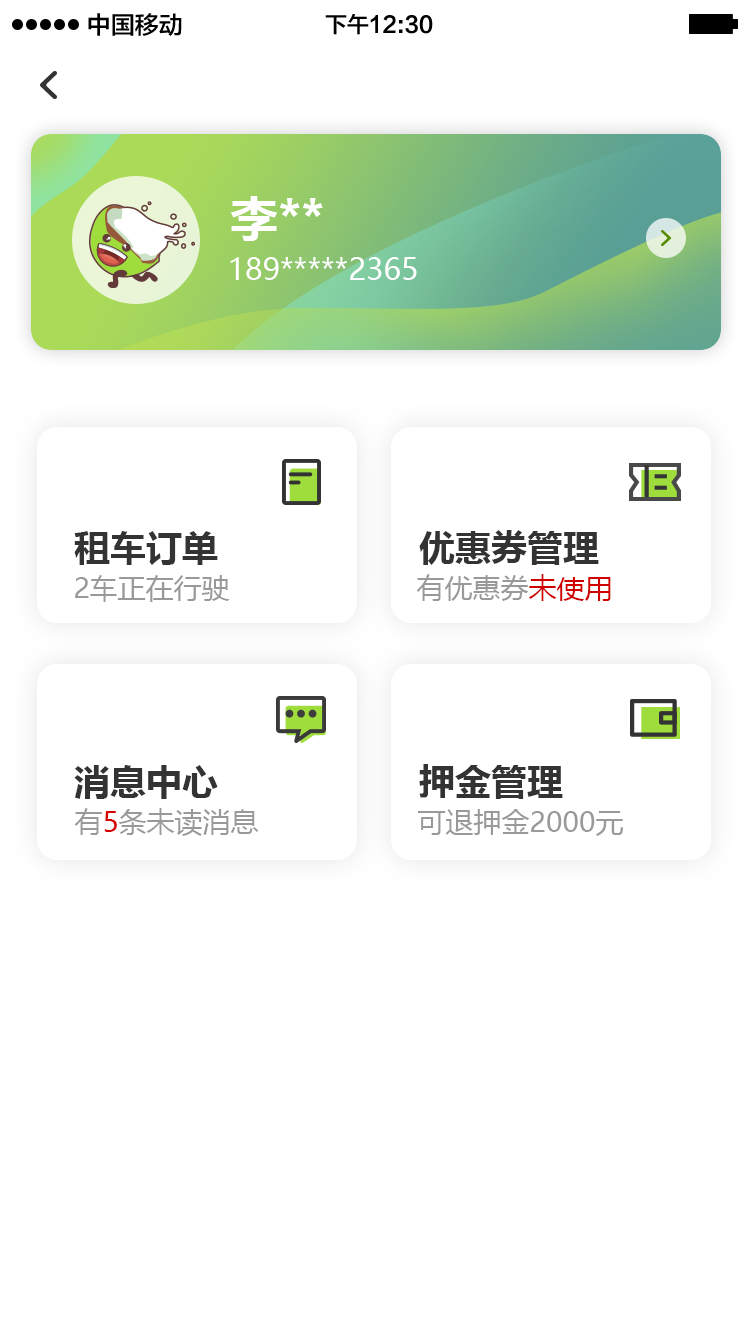
<style>
.page{position:relative;width:750px;height:1334px;background:#ffffff}
.page>*{position:absolute;margin:0}
.t1{font:24px "FZLTZHK--GBK1-0";color:#000000}
.t2{font:22px "FZLTZHK--GBK1-0";color:#000000}
.t3{font:48px "MicrosoftYaHei-Bold";color:#ffffff}
.t4{font:30px "MicrosoftYaHei";color:#ffffff}
.t5{font:36px "MicrosoftYaHei-Bold";color:#333333}
.t6{font:28px "MicrosoftYaHei";color:#999999}
.t7{font:28px "MicrosoftYaHei";color:#d10000}
.t8{font:28px "MicrosoftYaHei";color:#d80000}
</style>
<div class="page">
<p class="t1" style="left:88px;top:13px;width:94px;height:23px">中国移动</p>
<p class="t2" style="left:325px;top:14px;width:108px;height:21px">下午12:30</p>
<p class="t3" style="left:230px;top:196px;width:93px;height:45px">李**</p>
<p class="t4" style="left:230px;top:257px;width:187px;height:23px">189*****2365</p>
<p class="t5" style="left:74px;top:531px;width:144px;height:34px">租车订单</p>
<p class="t5" style="left:419px;top:530px;width:180px;height:35px">优惠券管理</p>
<p class="t6" style="left:75px;top:575px;width:155px;height:27px">2车正在行驶</p>
<p class="t6" style="left:416px;top:574px;width:195px;height:27px">有优惠券<span class="t7">未使用</span></p>
<p class="t5" style="left:74px;top:765px;width:144px;height:34px">消息中心</p>
<p class="t5" style="left:419px;top:764px;width:144px;height:35px">押金管理</p>
<p class="t6" style="left:74px;top:808px;width:185px;height:28px">有<span class="t8">5</span>条未读消息</p>
<p class="t6" style="left:418px;top:809px;width:206px;height:27px">可退押金2000元</p>
</div>
